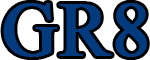
<style>
.page{position:relative;width:150px;height:60px;background:#ffffff}
.page>*{position:absolute;margin:0}
.t1{font:76px "TimesNewRomanPSMT";color:#013b7e;font-variant:small-caps;font-weight:bold}
</style>
<div class="page">
<p class="t1" style="left:3px;top:3px;width:144px;height:54px">GR8</p>
</div>
